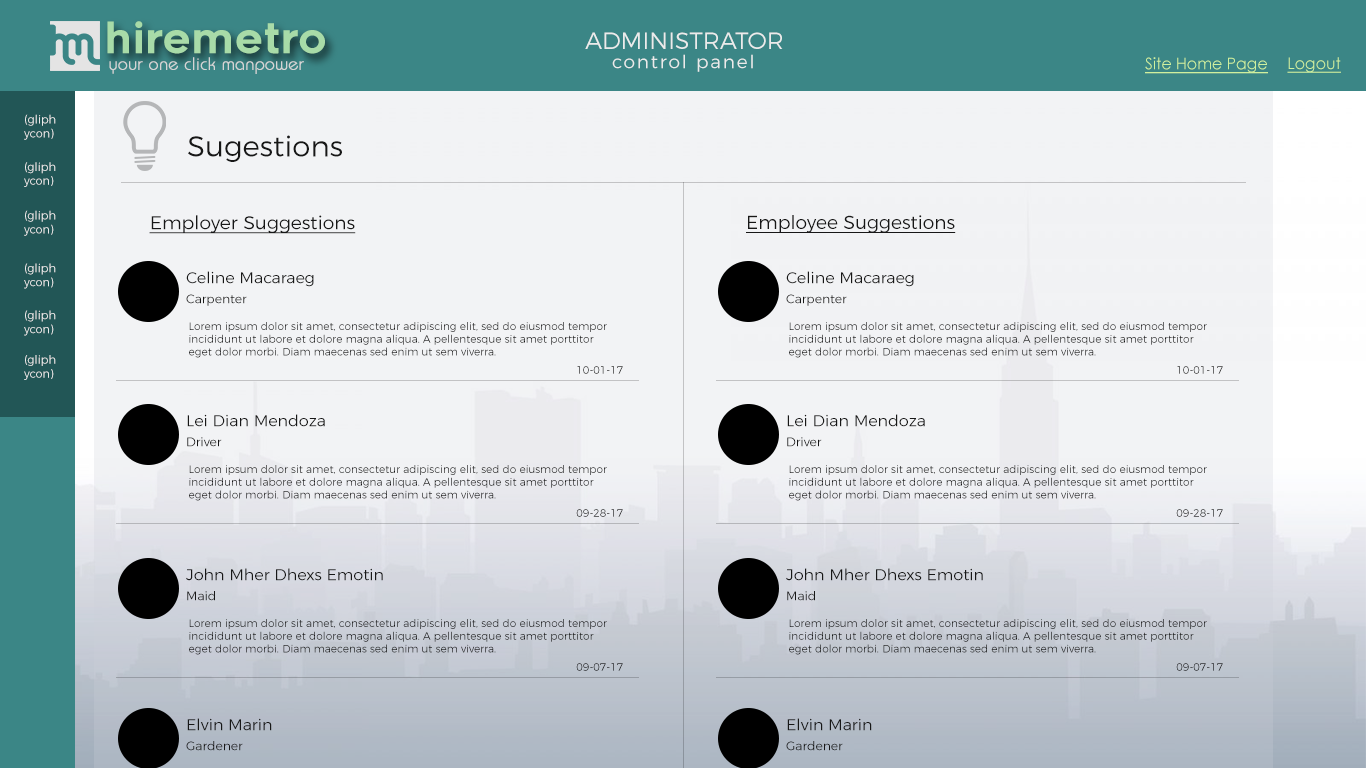
<style>
.page{position:relative;width:1366px;height:768px;background:#f2f3f5}
.page>*{position:absolute;margin:0}
.t1{font:42.1px "Renogare-Regular";color:#a8dba8}
.t2{font:23.6px "Montserrat-Light";color:#ebebeb}
.t3{font:18.4px "Montserrat-Light";letter-spacing:0.1em;color:#ebebeb}
.t4{font:17.5px "Brie-Light";color:#d5d5d5;font-weight:bold}
.t5{font:16.1px "CenturyGothic";color:#cff09e;text-decoration:underline}
.t6{font:11.5px "Montserrat-Light";color:#ebebeb}
.t7{font:28.9px "Montserrat-Light";color:#171717}
.t8{font:18.8px "Montserrat-Light";color:#171717;text-decoration:underline}
.t9{font:19px "Montserrat-Light";color:#171717;text-decoration:underline}
.t10{font:15.9px "Montserrat-Light";color:#171717}
.t11{font:12.3px "Montserrat-Light";color:#171717}
.t12{font:10.6px "Montserrat-Light";color:#171717}
.t13{font:10.6px "Montserrat-Light"}
</style>
<div class="page">
<p class="t1" style="left:107px;top:21px;width:218px;height:33px">hiremetro</p>
<p class="t2" style="left:585px;top:32px;width:198px;height:17px">ADMINISTRATOR</p>
<p class="t3" style="left:612px;top:54px;width:141px;height:18px">control panel</p>
<p class="t4" style="left:109px;top:57px;width:195px;height:17px">your one click manpower</p>
<p class="t5" style="left:1145px;top:57px;width:123px;height:17px">Site Home Page</p>
<p class="t5" style="left:1287px;top:57px;width:54px;height:16px">Logout</p>
<p class="t6" style="left:24px;top:114px;width:32px;height:26px">(gliph<br>ycon)</p>
<p class="t7" style="left:188px;top:135px;width:154px;height:27px">Sugestions</p>
<p class="t6" style="left:24px;top:162px;width:32px;height:25px">(gliph<br>ycon)</p>
<p class="t6" style="left:24px;top:210px;width:32px;height:26px">(gliph<br>ycon)</p>
<p class="t8" style="left:149px;top:215px;width:207px;height:19px">Employer Suggestions</p>
<p class="t9" style="left:746px;top:215px;width:210px;height:18px">Employee Suggestions</p>
<p class="t6" style="left:24px;top:263px;width:32px;height:26px">(gliph<br>ycon)</p>
<p class="t10" style="left:186px;top:271px;width:128px;height:16px">Celine Macaraeg</p>
<p class="t10" style="left:786px;top:271px;width:128px;height:16px">Celine Macaraeg</p>
<p class="t11" style="left:186px;top:294px;width:61px;height:12px">Carpenter</p>
<p class="t11" style="left:786px;top:294px;width:61px;height:12px">Carpenter</p>
<p class="t6" style="left:24px;top:310px;width:32px;height:26px">(gliph<br>ycon)</p>
<p class="t12" style="left:189px;top:322px;width:418px;height:36px">Lorem ipsum dolor sit amet, consectetur adipiscing elit, sed do eiusmod tempor incididunt ut labore et dolore magna aliqua. A pellentesque sit amet porttitor eget dolor morbi. Diam maecenas sed enim ut sem viverra.</p>
<p class="t12" style="left:789px;top:322px;width:418px;height:36px">Lorem ipsum dolor sit amet, consectetur adipiscing elit, sed do eiusmod tempor incididunt ut labore et dolore magna aliqua. A pellentesque sit amet porttitor eget dolor morbi. Diam maecenas sed enim ut sem viverra.</p>
<p class="t6" style="left:24px;top:355px;width:32px;height:25px">(gliph<br>ycon)</p>
<p class="t13" style="left:577px;top:366px;width:46px;height:8px">10-01-17</p>
<p class="t13" style="left:1177px;top:366px;width:46px;height:8px">10-01-17</p>
<p class="t10" style="left:187px;top:414px;width:138px;height:13px">Lei Dian Mendoza</p>
<p class="t10" style="left:787px;top:414px;width:138px;height:13px">Lei Dian Mendoza</p>
<p class="t11" style="left:187px;top:437px;width:35px;height:10px">Driver</p>
<p class="t11" style="left:787px;top:437px;width:35px;height:10px">Driver</p>
<p class="t12" style="left:189px;top:465px;width:418px;height:36px">Lorem ipsum dolor sit amet, consectetur adipiscing elit, sed do eiusmod tempor incididunt ut labore et dolore magna aliqua. A pellentesque sit amet porttitor eget dolor morbi. Diam maecenas sed enim ut sem viverra.</p>
<p class="t12" style="left:789px;top:465px;width:418px;height:36px">Lorem ipsum dolor sit amet, consectetur adipiscing elit, sed do eiusmod tempor incididunt ut labore et dolore magna aliqua. A pellentesque sit amet porttitor eget dolor morbi. Diam maecenas sed enim ut sem viverra.</p>
<p class="t13" style="left:576px;top:509px;width:47px;height:8px">09-28-17</p>
<p class="t13" style="left:1176px;top:509px;width:47px;height:8px">09-28-17</p>
<p class="t10" style="left:186px;top:568px;width:197px;height:13px">John Mher Dhexs Emotin</p>
<p class="t10" style="left:786px;top:568px;width:197px;height:13px">John Mher Dhexs Emotin</p>
<p class="t11" style="left:187px;top:591px;width:28px;height:10px">Maid</p>
<p class="t11" style="left:787px;top:591px;width:28px;height:10px">Maid</p>
<p class="t12" style="left:189px;top:619px;width:418px;height:36px">Lorem ipsum dolor sit amet, consectetur adipiscing elit, sed do eiusmod tempor incididunt ut labore et dolore magna aliqua. A pellentesque sit amet porttitor eget dolor morbi. Diam maecenas sed enim ut sem viverra.</p>
<p class="t12" style="left:789px;top:619px;width:418px;height:36px">Lorem ipsum dolor sit amet, consectetur adipiscing elit, sed do eiusmod tempor incididunt ut labore et dolore magna aliqua. A pellentesque sit amet porttitor eget dolor morbi. Diam maecenas sed enim ut sem viverra.</p>
<p class="t13" style="left:576px;top:663px;width:47px;height:8px">09-07-17</p>
<p class="t13" style="left:1176px;top:663px;width:47px;height:8px">09-07-17</p>
<p class="t10" style="left:187px;top:718px;width:85px;height:13px">Elvin Marin</p>
<p class="t10" style="left:787px;top:718px;width:85px;height:13px">Elvin Marin</p>
<p class="t11" style="left:186px;top:741px;width:57px;height:10px">Gardener</p>
<p class="t11" style="left:786px;top:741px;width:57px;height:10px">Gardener</p>
</div>
